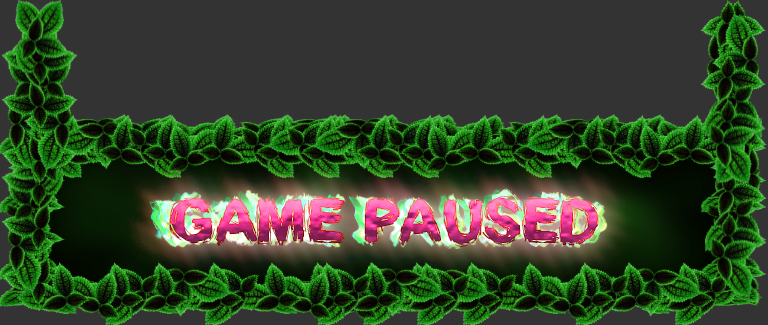
<style>
.page{position:relative;width:768px;height:325px;background:#333333}
.page>*{position:absolute;margin:0}
.t1{font:60px "SplinterWood";text-transform:uppercase}
</style>
<div class="page">
<p class="t1" style="left:169px;top:195px;width:430px;height:52px">GAME PAUSED</p>
</div>
